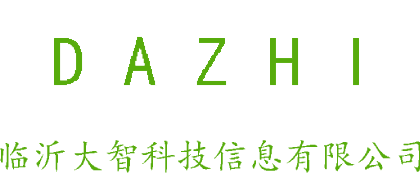
<style>
.page{position:relative;width:420px;height:195px;background:#ffffff}
.page>*{position:absolute;margin:0}
.t1{font:36px "¿¬Ìå";color:#57ac0c}
</style>
<div class="page">
<p class="t1" style="left:0px;top:140px;width:422px;height:33px">临沂大智科技信息有限公司</p>
</div>
